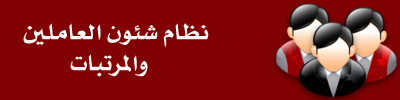
<style>
.page{position:relative;width:400px;height:100px;background:#810102}
.page>*{position:absolute;margin:0}
.t1{font:30px "";color:#f9f6f6}
</style>
<div class="page">
<p class="t1" style="left:23px;top:23px;width:186px;height:25px">نظام شئون العاملين</p>
<p class="t1" style="left:70px;top:54px;width:78px;height:23px">والمرتبات</p>
</div>
